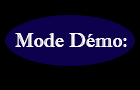
<style>
.page{position:relative;width:140px;height:90px;background:#000000}
.page>*{position:absolute;margin:0}
.t1{font:20px "ImprintMT-Shadow";color:#ffffff}
</style>
<div class="page">
<p class="t1" style="left:15px;top:33px;width:112px;height:14px">Mode Démo:</p>
</div>
